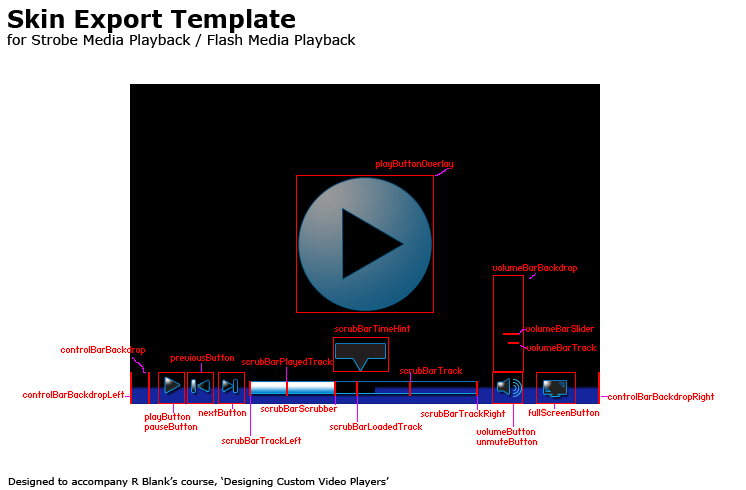
<style>
.page{position:relative;width:746px;height:490px;background:#ffffff}
.page>*{position:absolute;margin:0}
.t1{font:14px "Verdana";color:#000000}
.t2{font:24px/13.6px "Verdana-Bold";color:#000000}
.t3{font:8px "Standard0753";color:#ff0000}
.t4{font:10px "Verdana";color:#000000}
</style>
<div class="page">
<p class="t1" style="left:7px;top:9px;width:349px;height:39px"><span class="t2">Skin Export Template<br></span>for Strobe Media Playback / Flash Media Playback</p>
<p class="t3" style="left:375px;top:160px;width:79px;height:9px">playButtonOverlay</p>
<p class="t3" style="left:492px;top:264px;width:86px;height:9px">volumeBarBackdrop</p>
<p class="t3" style="left:334px;top:325px;width:77px;height:7px">scrubBarTimeHint</p>
<p class="t3" style="left:525px;top:324px;width:70px;height:9px">volumeBarSlider</p>
<p class="t3" style="left:60px;top:346px;width:86px;height:9px">controlBarBackdrop</p>
<p class="t3" style="left:526px;top:344px;width:71px;height:7px">volumeBarTrack</p>
<p class="t3" style="left:170px;top:354px;width:65px;height:9px">previousButton</p>
<p class="t3" style="left:241px;top:358px;width:92px;height:9px">scrubBarPlayedTrack</p>
<p class="t3" style="left:399px;top:367px;width:64px;height:7px">scrubBarTrack</p>
<p class="t3" style="left:22px;top:391px;width:103px;height:9px">controlBarBackdropLeft</p>
<p class="t3" style="left:607px;top:393px;width:108px;height:9px">controlBarBackdropRight</p>
<p class="t3" style="left:144px;top:413px;width:54px;height:19px">playButton<br>pauseButton</p>
<p class="t3" style="left:198px;top:409px;width:49px;height:7px">nextButton</p>
<p class="t3" style="left:260px;top:404px;width:78px;height:9px">scrubBarScrubber</p>
<p class="t3" style="left:420px;top:410px;width:86px;height:9px">scrubBarTrackRight</p>
<p class="t3" style="left:528px;top:408px;width:72px;height:9px">fullScreenButton</p>
<p class="t3" style="left:329px;top:423px;width:94px;height:7px">scrubBarLoadedTrack</p>
<p class="t3" style="left:221px;top:437px;width:81px;height:7px">scrubBarTrackLeft</p>
<p class="t3" style="left:476px;top:428px;width:62px;height:17px">volumeButton<br>unmuteButton</p>
<p class="t4" style="left:8px;top:477px;width:381px;height:10px">Designed to accompany R Blank’s course, ‘Designing Custom Video Players’</p>
</div>
